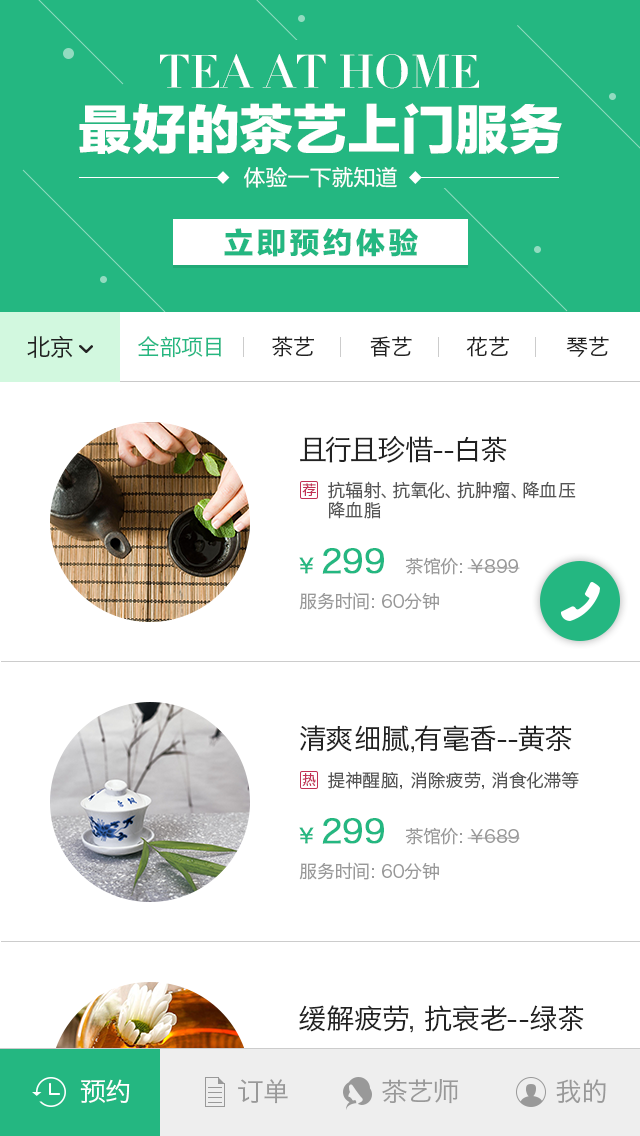
<style>
.page{position:relative;width:640px;height:1136px;background:#ffffff}
.page>*{position:absolute;margin:0}
.t1{font:45.6px "MFShangYa_Noncommercial-Regular";color:#ffffff}
.t2{font:53.8px "FZLTTHJW--GB1-0";color:#ffffff}
.t3{font:22px "FZLTHJW--GB1-0";color:#ffffff}
.t4{font:29.9px "FZLTTHJW--GB1-0";letter-spacing:0.1em;color:#24b781}
.t5{font:24px "HiraginoSansGB-W3";color:#222222}
.t6{font:22px "HiraginoSansGB-W3";color:#24b781}
.t7{font:22px "HiraginoSansGB-W3";color:#222222}
.t8{font:28px "HiraginoSansGB-W3";color:#222222}
.t9{font:14px "HiraginoSansGB-W3";color:#c13155}
.t10{font:18px/20px "HiraginoSansGB-W3";color:#555555}
.t11{font:20px "HiraginoSansGB-W3";color:#24b781;font-weight:bold}
.t12{font:32px "HiraginoSansGB-W3";color:#24b781;font-weight:bold}
.t13{font:18px "HiraginoSansGB-W3";color:#999999}
.t14{font:18px "HiraginoSansGB-W3";color:#555555}
.t15{font:26px "HiraginoSansGB-W3";color:#ffffff}
.t16{font:26px "HiraginoSansGB-W3";color:#999999}
</style>
<div class="page">
<p class="t1" style="left:160px;top:54px;width:319px;height:35px">TEA AT HOME</p>
<p class="t2" style="left:79px;top:103px;width:483px;height:52px">最好的茶艺上门服务</p>
<p class="t3" style="left:244px;top:166px;width:153px;height:22px">体验一下就知道</p>
<p class="t4" style="left:224px;top:228px;width:194px;height:29px">立即预约体验</p>
<p class="t5" style="left:27px;top:335px;width:46px;height:23px">北京</p>
<p class="t6" style="left:138px;top:336px;width:83px;height:22px">全部项目</p>
<p class="t7" style="left:272px;top:336px;width:42px;height:21px">茶艺</p>
<p class="t7" style="left:370px;top:336px;width:42px;height:21px">香艺</p>
<p class="t7" style="left:466px;top:336px;width:43px;height:21px">花艺</p>
<p class="t7" style="left:566px;top:336px;width:43px;height:21px">琴艺</p>
<p class="t8" style="left:300px;top:436px;width:207px;height:27px">且行且珍惜--白茶</p>
<p class="t9" style="left:302px;top:483px;width:14px;height:13px">荐</p>
<p class="t10" style="left:328px;top:481px;width:248px;height:38px">抗辐射、抗氧化、抗肿瘤、降血压<br>降血脂</p>
<p class="t11" style="left:299px;top:557px;width:15px;height:17px">￥</p>
<p class="t12" style="left:322px;top:548px;width:62px;height:26px">299</p>
<p class="t13" style="left:405px;top:557px;width:115px;height:18px">茶馆价：￥899</p>
<p class="t13" style="left:299px;top:592px;width:140px;height:18px">服务时间：60分钟</p>
<p class="t8" style="left:300px;top:725px;width:272px;height:28px">清爽细腻,有毫香--黄茶</p>
<p class="t9" style="left:302px;top:773px;width:14px;height:13px">热</p>
<p class="t14" style="left:328px;top:771px;width:251px;height:19px">提神醒脑，消除疲劳，消食化滞等</p>
<p class="t12" style="left:322px;top:818px;width:62px;height:26px">299</p>
<p class="t11" style="left:299px;top:827px;width:15px;height:17px">￥</p>
<p class="t13" style="left:405px;top:827px;width:115px;height:18px">茶馆价：￥689</p>
<p class="t13" style="left:299px;top:862px;width:140px;height:18px">服务时间：60分钟</p>
<p class="t8" style="left:299px;top:1005px;width:285px;height:28px">缓解疲劳，抗衰老--绿茶</p>
<p class="t15" style="left:80px;top:1079px;width:50px;height:24px">预约</p>
<p class="t16" style="left:238px;top:1079px;width:50px;height:25px">订单</p>
<p class="t16" style="left:382px;top:1079px;width:76px;height:25px">茶艺师</p>
<p class="t16" style="left:556px;top:1079px;width:50px;height:24px">我的</p>
</div>
